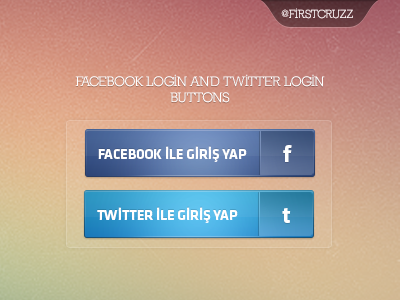
<style>
.page{position:relative;width:400px;height:300px}
.page>*{position:absolute;margin:0}
.t1{font:14px "Nilland-Bold";color:#ffffff;text-transform:uppercase}
.t2{font:14px "Klavika-Bold";color:#ffffff;text-transform:uppercase}
.t3{font:24px "Klavika-Bold";color:#ffffff}
</style>
<div class="page">
<p class="t1" style="left:75px;top:74px;width:250px;height:29px;text-align:center">facebook login and twitter login <br>buttons</p>
<p class="t2" style="left:98px;top:145px;width:149px;height:16px">FACEBOOK İLE GİRİŞ YAP</p>
<p class="t2" style="left:98px;top:146px;width:149px;height:16px">FACEBOOK İLE GİRİŞ YAP</p>
<p class="t3" style="left:283px;top:145px;width:9px;height:17px">f</p>
<p class="t2" style="left:97px;top:206px;width:141px;height:16px">TWİTTER İLE GİRİŞ YAP</p>
<p class="t2" style="left:97px;top:207px;width:141px;height:16px">TWİTTER İLE GİRİŞ YAP</p>
<p class="t3" style="left:282px;top:208px;width:9px;height:15px">t</p>
</div>
